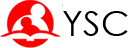
<style>
.page{position:relative;width:129px;height:48px;background:#ffffff}
.page>*{position:absolute;margin:0}
.t1{font:35.4px "CenturyGothic";color:#000000}
</style>
<div class="page">
<p class="t1" style="left:63px;top:11px;width:65px;height:25px">YSC</p>
</div>
